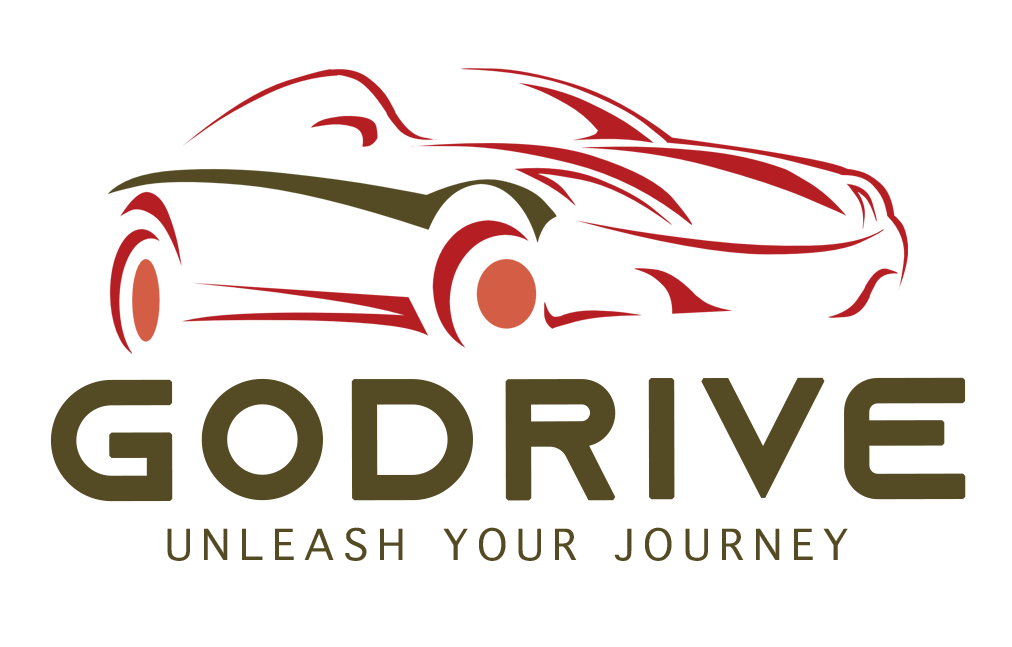
<style>
.page{position:relative;width:1012px;height:647px;background:#ffffff}
.page>*{position:absolute;margin:0}
.t1{font:166.7px "AzonixRegular";letter-spacing:0.1em;color:#544a23;text-transform:uppercase;font-weight:bold}
.t2{font:58.3px "AppleSymbols";letter-spacing:0.15em;color:#544a23;text-transform:uppercase}
</style>
<div class="page">
<p class="t1" style="left:50px;top:377px;width:916px;height:125px">GoDrive</p>
<p class="t2" style="left:167px;top:527px;width:681px;height:34px">Unleash Your Journey</p>
</div>
